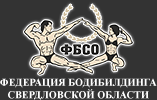
<style>
.page{position:relative;width:157px;height:100px;background:#333333}
.page>*{position:absolute;margin:0}
.t1{font:10.4px "TimesNewRomanPS-BoldMT";color:#ffffff}
</style>
<div class="page">
<p class="t1" style="left:0px;top:78px;width:157px;height:23px;text-align:center">ФЕДЕРАЦИЯ БОДИБИЛДИНГА<br>СВЕРДЛОВСКОЙ ОБЛАСТИ</p>
</div>
